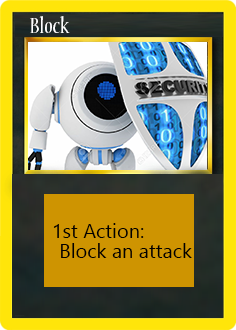
<style>
.page{position:relative;width:236px;height:330px}
.page>*{position:absolute;margin:0}
.t1{font:24px "NuevaStd-Cond";color:#ffffff}
.t2{font:20px "LeelawadeeUI";color:#000000}
</style>
<div class="page">
<p class="t1" style="left:30px;top:16px;width:40px;height:17px">Block</p>
<p class="t2" style="left:53px;top:223px;width:91px;height:15px">1st Action:</p>
<p class="t2" style="left:61px;top:243px;width:131px;height:15px">Block an attack</p>
</div>
